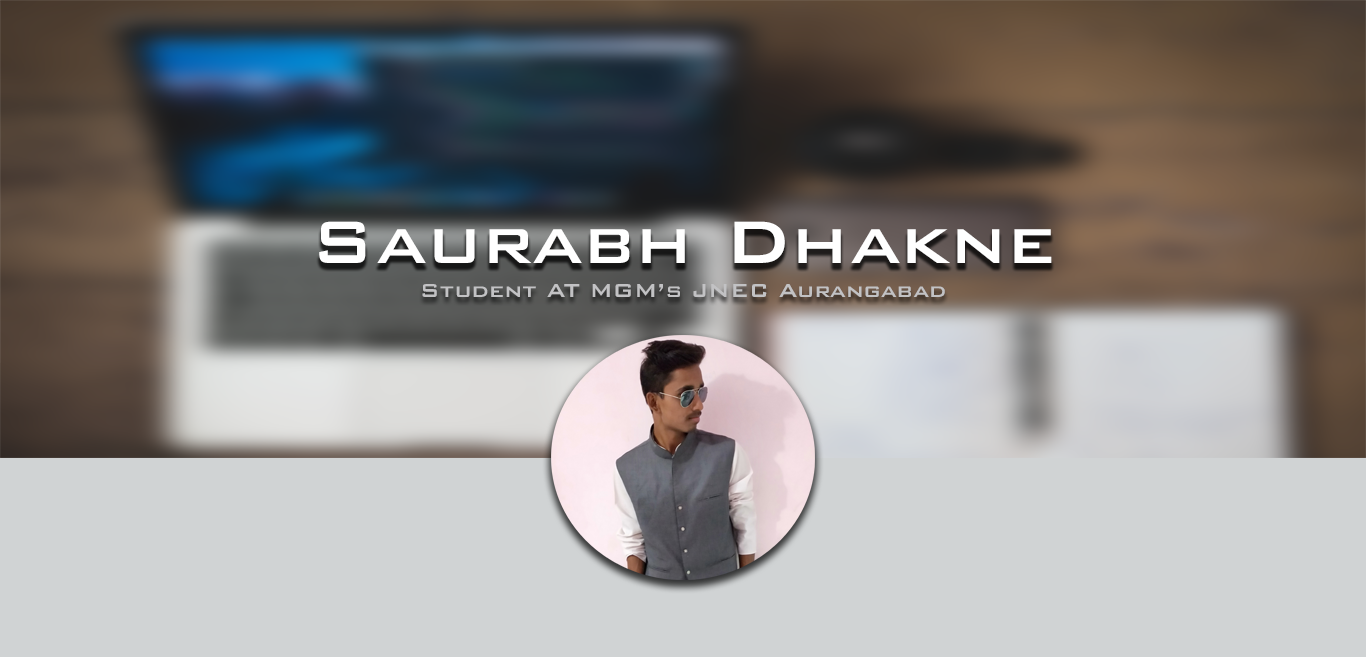
<style>
.page{position:relative;width:1366px;height:657px;background:#d0d3d4}
.page>*{position:absolute;margin:0}
.t1{font:80px "BankGothicBold";color:#ffffff}
.t2{font:25px "BankGothicBold";color:#c2c2c4}
</style>
<div class="page">
<p class="t1" style="left:319px;top:221px;width:733px;height:42px">Saurabh Dhakne</p>
<p class="t2" style="left:422px;top:284px;width:523px;height:13px">Student AT MGM’s JNEC Aurangabad</p>
</div>
